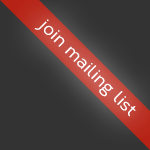
<style>
.page{position:relative;width:150px;height:150px;background:#333333}
.page>*{position:absolute;margin:0}
.t1{font:16.4px "Corbert-Regular";color:#ffffff;font-weight:bold}
</style>
<div class="page">
<p class="t1" style="left:34px;top:19px;width:102px;height:98px;rotate:45deg">join mailing list</p>
</div>
